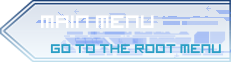
<style>
.page{position:relative;width:231px;height:62px}
.page>*{position:absolute;margin:0}
.t1{font:20px "imagine-font";color:#ffffff}
.t2{font:14px "imagine-font";color:#2a9fc5}
</style>
<div class="page">
<p class="t1" style="left:41px;top:15px;width:113px;height:13px">MAIN MENU</p>
<p class="t2" style="left:50px;top:44px;width:171px;height:10px">Go to the root menu</p>
</div>
